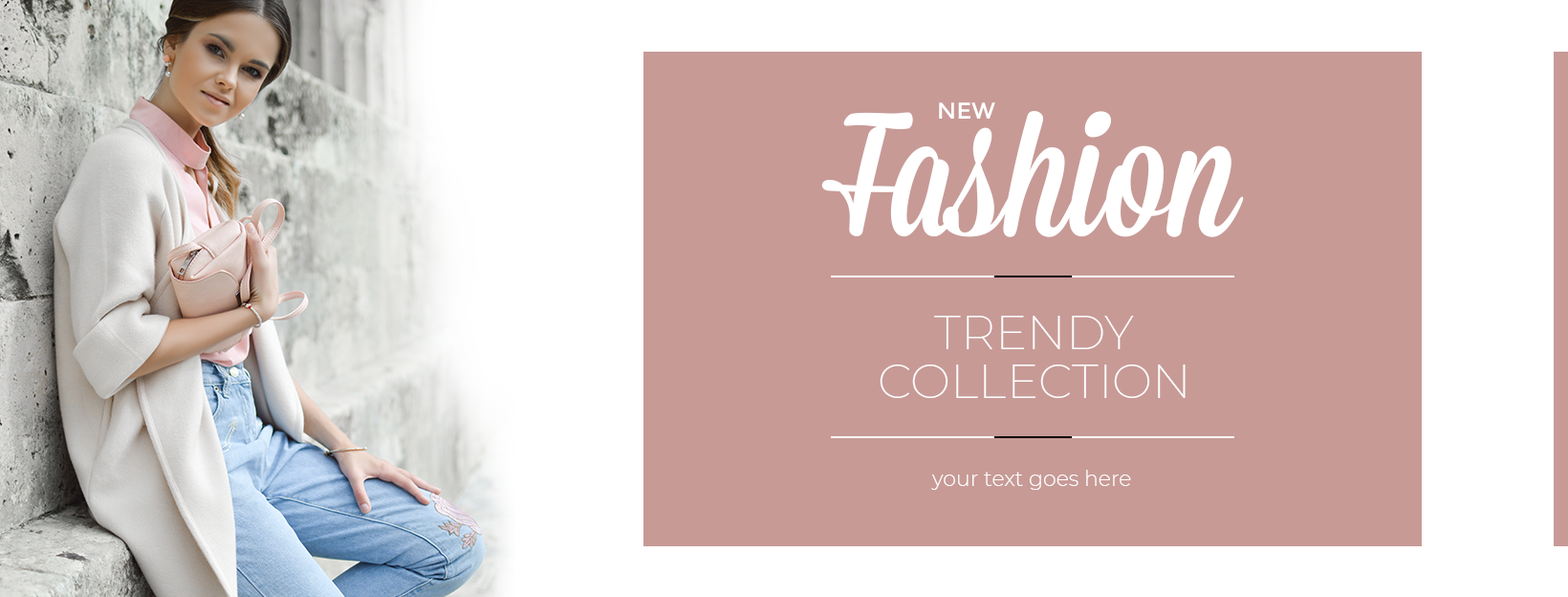
<style>
.page{position:relative;width:1568px;height:597px;background:#c79a96}
.page>*{position:absolute;margin:0}
.t1{font:175px "Mission-Script";color:#ffffff}
.t2{font:22.9px "Montserrat-Regular";color:#ffffff;text-transform:uppercase}
.t3{font:47.8px/48.8px "Montserrat-ExtraLight";color:#ffffff;text-transform:uppercase}
.t4{font:21px "Montserrat-Light";color:#ffffff}
</style>
<div class="page">
<p class="t1" style="left:821px;top:111px;width:423px;height:126px">Fashion</p>
<p class="t2" style="left:939px;top:102px;width:56px;height:17px">new</p>
<p class="t3" style="left:880px;top:316px;width:306px;height:82px;text-align:center">Trendy<br>collection</p>
<p class="t4" style="left:931px;top:469px;width:200px;height:21px">your text goes here</p>
</div>
